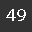
<style>
.page{position:relative;width:32px;height:32px;background:#333333}
.page>*{position:absolute;margin:0}
.t1{font:17.8px "MyriadPro-Regular";color:#ffffff;scale:1.12 1}
</style>
<div class="page">
<p class="t1" style="left:6px;top:9px;width:20px;height:12px">49</p>
</div>
